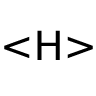
<style>
.page{position:relative;width:96px;height:96px;background:#ffffff}
.page>*{position:absolute;margin:0}
.t1{font:40px "DejaVuSans";color:#000000}
</style>
<div class="page">
<p class="t1" style="left:4px;top:30px;width:89px;height:30px">&lt;H&gt;</p>
</div>
